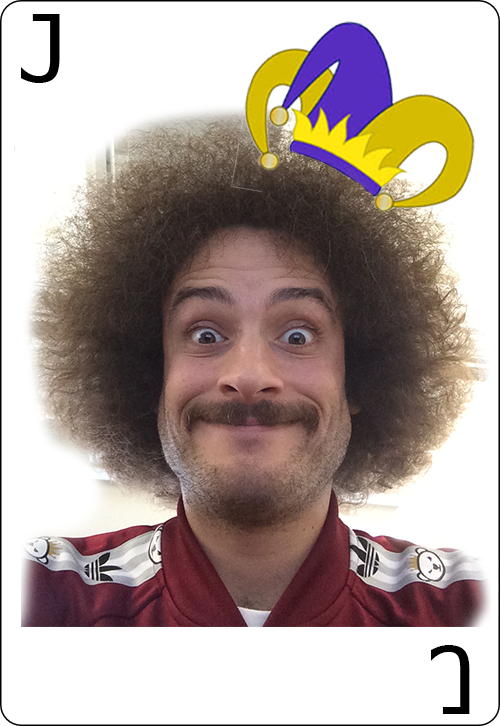
<style>
.page{position:relative;width:500px;height:726px;background:#ffffff}
.page>*{position:absolute;margin:0}
.t1{font:92.8px "Menlo-Regular";color:#000000}
</style>
<div class="page">
<p class="t1" style="left:431px;top:645px;width:39px;height:69px">J</p>
</div>
